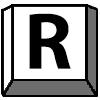
<style>
.page{position:relative;width:100px;height:100px;background:#ffffff}
.page>*{position:absolute;margin:0}
.t1{font:70.2px "AdobeGothicStd-Bold";color:#000000;font-weight:bold;scale:1.11 1}
</style>
<div class="page">
<p class="t1" style="left:29px;top:13px;width:42px;height:56px">R</p>
</div>
